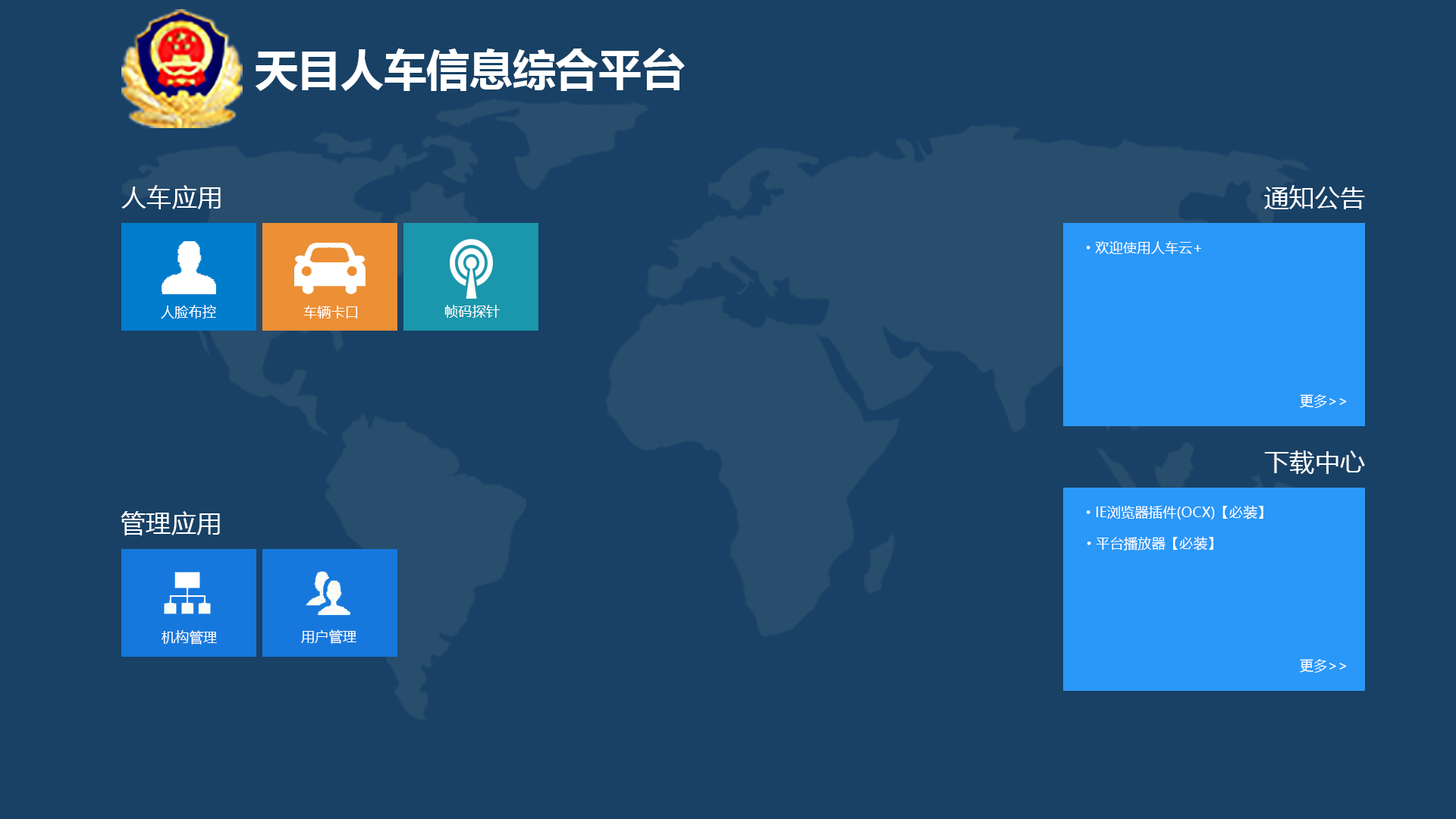
<style>
.page{position:relative;width:1456px;height:819px;background:#184165}
.page>*{position:absolute;margin:0}
.t1{font:43px "MicrosoftYaHei-Bold";color:#ffffff}
.t2{font:25.3px "MicrosoftYaHei";color:#ffffff}
.t3{font:13.9px "MicrosoftYaHei";color:#ffffff}
.t4{font:13.9px "SimSun";color:#ffffff}
</style>
<div class="page">
<p class="t1" style="left:255px;top:48px;width:430px;height:43px">天目人车信息综合平台</p>
<p class="t2" style="left:121px;top:185px;width:100px;height:24px">人车应用</p>
<p class="t2" style="left:1264px;top:185px;width:101px;height:24px">通知公告</p>
<p class="t3" style="left:1086px;top:241px;width:115px;height:13px"><span class="t4">·</span>欢迎使用人车云+</p>
<p class="t3" style="left:161px;top:305px;width:55px;height:13px">人脸布控</p>
<p class="t3" style="left:303px;top:306px;width:55px;height:12px">车辆卡口</p>
<p class="t3" style="left:444px;top:305px;width:56px;height:13px">帧码探针</p>
<p class="t3" style="left:1300px;top:394px;width:47px;height:14px">更多&gt;&gt;</p>
<p class="t2" style="left:1264px;top:450px;width:101px;height:24px">下载中心</p>
<p class="t3" style="left:1086px;top:505px;width:177px;height:14px"><span class="t4">·</span>IE浏览器插件(OCX)【必装】</p>
<p class="t2" style="left:121px;top:511px;width:99px;height:24px">管理应用</p>
<p class="t3" style="left:1087px;top:536px;width:126px;height:15px"><span class="t4">·</span>平台播放器【必装】</p>
<p class="t3" style="left:301px;top:629px;width:55px;height:15px">用户管理</p>
<p class="t3" style="left:162px;top:630px;width:55px;height:15px">机构管理</p>
<p class="t3" style="left:1300px;top:659px;width:47px;height:14px">更多&gt;&gt;</p>
</div>
